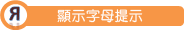
<style>
.page{position:relative;width:184px;height:30px;background:#f79646}
.page>*{position:absolute;margin:0}
.t1{font:14px "DFYuan-Md-HK-BF";letter-spacing:0.02em;color:#fefcfb}
</style>
<div class="page">
<p class="t1" style="left:57px;top:9px;width:86px;height:14px">顯示字母提示</p>
</div>
